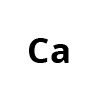
<style>
.page{position:relative;width:100px;height:100px;background:#ffffff}
.page>*{position:absolute;margin:0}
.t1{font:35px "OpenSans-Bold";color:#000000}
</style>
<div class="page">
<p class="t1" style="left:29px;top:38px;width:40px;height:25px">Ca</p>
</div>
